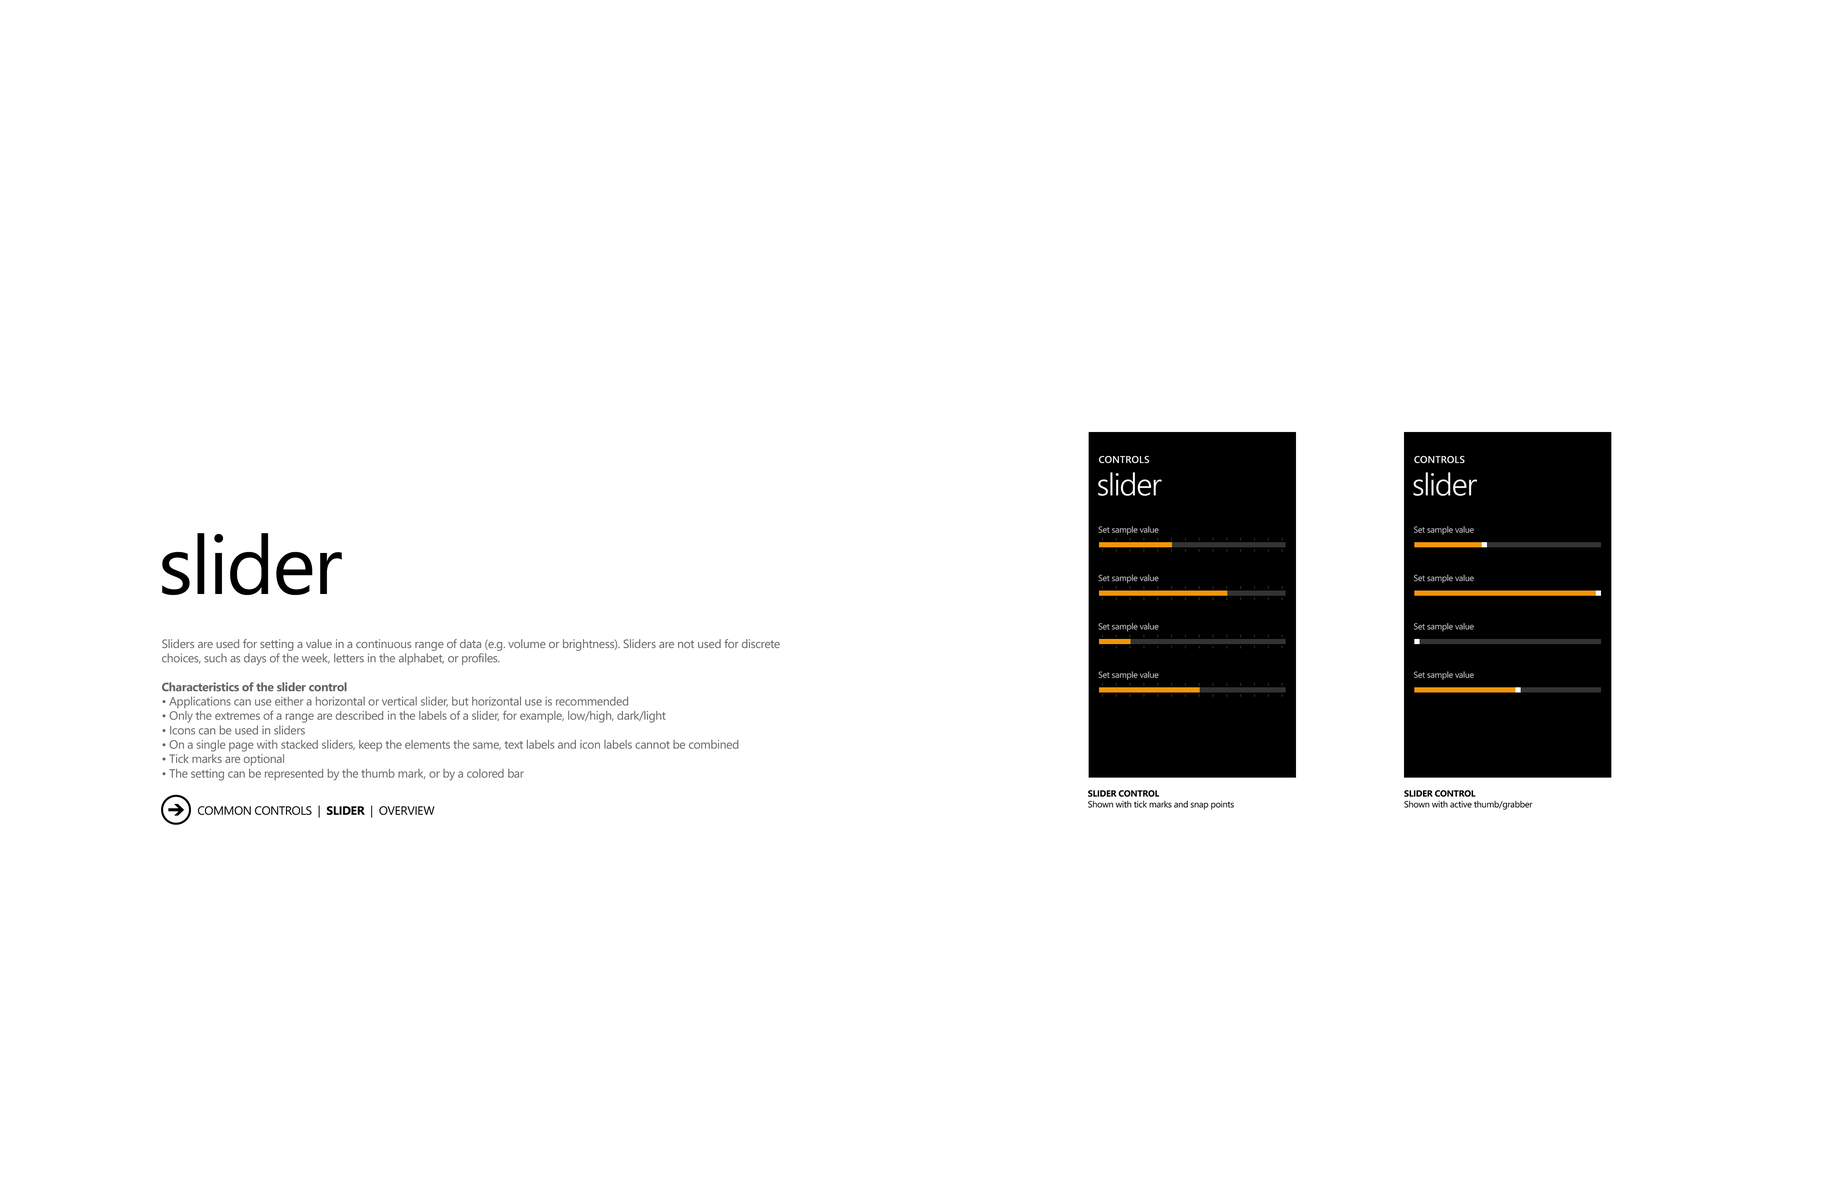
<style>
.page{position:relative;width:1836px;height:1188px;background:#ffffff}
.page>*{position:absolute;margin:0}
.t1{font:9.8px "SegoeWP-Semibold";letter-spacing:0.025em;color:#ffffff;text-transform:uppercase}
.t2{font:31.1px "SegoeWP-SemiLight";letter-spacing:-0.01em;color:#ffffff}
.t3{font:81.9px "SegoeWP";letter-spacing:-0.025em;color:#000000}
.t4{font:8.6px "SegoeWP";letter-spacing:-0.025em;color:#cccccc}
.t5{font:12px "SegoeWP";letter-spacing:-0.025em;color:#666666}
.t6{font:12px "SegoeWP-Bold";letter-spacing:-0.025em;color:#666666}
.t7{font:9px "SegoeWP";letter-spacing:-0.025em;color:#000000}
.t8{font:9px "SegoeWP-Bold";letter-spacing:-0.025em;color:#000000;text-transform:uppercase}
.t9{font:12px "SegoeWP";letter-spacing:-0.025em;color:#000000}
.t10{font:12px "SegoeWP-Bold";letter-spacing:-0.025em;color:#000000}
</style>
<div class="page">
<p class="t1" style="left:1099px;top:456px;width:50px;height:7px">controls</p>
<p class="t1" style="left:1414px;top:456px;width:50px;height:7px">controls</p>
<p class="t2" style="left:1098px;top:472px;width:64px;height:24px">slider</p>
<p class="t2" style="left:1414px;top:472px;width:63px;height:24px">slider</p>
<p class="t3" style="left:162px;top:533px;width:180px;height:62px">slider</p>
<p class="t4" style="left:1099px;top:526px;width:60px;height:9px">Set sample value</p>
<p class="t4" style="left:1414px;top:526px;width:60px;height:9px">Set sample value</p>
<p class="t4" style="left:1099px;top:575px;width:60px;height:8px">Set sample value</p>
<p class="t4" style="left:1414px;top:575px;width:60px;height:8px">Set sample value</p>
<p class="t4" style="left:1099px;top:623px;width:60px;height:9px">Set sample value</p>
<p class="t4" style="left:1414px;top:623px;width:60px;height:9px">Set sample value</p>
<p class="t5" style="left:162px;top:639px;width:618px;height:142px">Sliders are used for setting a value in a continuous range of data (e.g. volume or brightness). Sliders are not used for discrete choices, such as days of the week, letters in the alphabet, or profiles.<br><br><span class="t6">Characteristics of the slider control<br></span>• Applications can use either a horizontal or vertical slider, but horizontal use is recommended<br>• Only the extremes of a range are described in the labels of a slider, for example, low/high, dark/light<br>• Icons can be used in sliders<br>• On a single page with stacked sliders, keep the elements the same, text labels and icon labels cannot be combined<br>• Tick marks are optional<br>• The setting can be represented by the thumb mark, or by a colored bar</p>
<p class="t4" style="left:1099px;top:671px;width:60px;height:9px">Set sample value</p>
<p class="t4" style="left:1414px;top:671px;width:60px;height:9px">Set sample value</p>
<p class="t7" style="left:1088px;top:790px;width:146px;height:20px"><span class="t8">slider control<br></span>Shown with tick marks and snap points</p>
<p class="t7" style="left:1404px;top:790px;width:129px;height:20px"><span class="t8">slider control<br></span>Shown with active thumb/grabber</p>
<p class="t9" style="left:198px;top:805px;width:237px;height:13px">COMMON CONTROLS  |  <span class="t10">SLIDER</span>  |  OVERVIEW</p>
</div>
